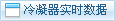
<style>
.page{position:relative;width:115px;height:21px}
.page>*{position:absolute;margin:0}
.t1{font:12px "SimSun";color:#265d87}
</style>
<div class="page">
<p class="t1" style="left:24px;top:4px;width:83px;height:11px">冷凝器实时数据</p>
</div>
